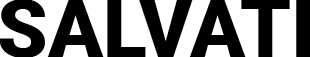
<style>
.page{position:relative;width:310px;height:57px;background:#000000}
.page>*{position:absolute;margin:0}
.t1{font:80.8px "Roboto-Black";color:#000000}
</style>
<div class="page">
<p class="t1" style="left:0px;top:0px;width:311px;height:58px">SALVATI</p>
</div>
